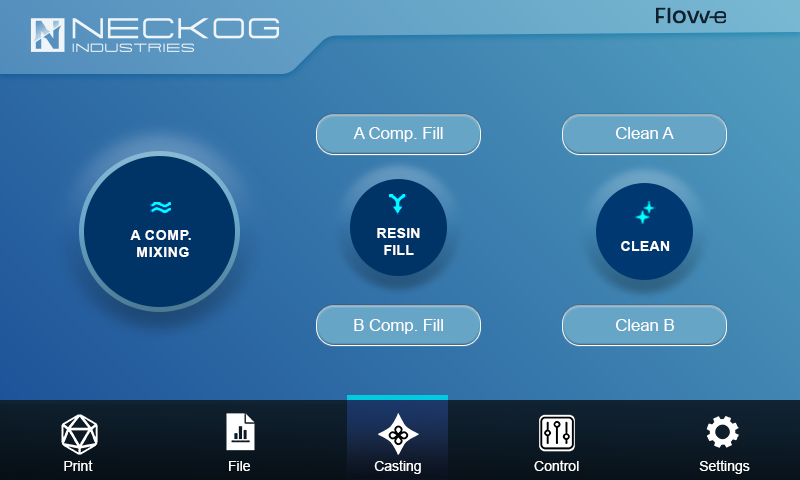
<style>
.page{position:relative;width:800px;height:480px}
.page>*{position:absolute;margin:0}
.t1{font:16.7px "ArialMT";color:#ffffff}
.t2{font:14.3px "Arial-BoldMT";color:#ffffff;text-transform:uppercase}
.t3{font:14.4px "Arial-BoldMT";color:#ffffff}
.t4{font:14px "ArialMT";color:#ffffff}
</style>
<div class="page">
<p class="t1" style="left:353px;top:127px;width:90px;height:15px">A Comp. Fill</p>
<p class="t1" style="left:616px;top:127px;width:58px;height:12px">Clean A</p>
<p class="t2" style="left:130px;top:230px;width:61px;height:27px;text-align:center">A Comp. <br>Mixing</p>
<p class="t3" style="left:377px;top:228px;width:43px;height:27px;text-align:center">RESIN<br>FILL</p>
<p class="t3" style="left:621px;top:241px;width:49px;height:10px">CLEAN</p>
<p class="t1" style="left:354px;top:319px;width:89px;height:15px">B Comp. Fill</p>
<p class="t1" style="left:616px;top:319px;width:58px;height:12px">Clean B</p>
<p class="t4" style="left:64px;top:460px;width:29px;height:11px">Print</p>
<p class="t4" style="left:229px;top:461px;width:21px;height:10px">File</p>
<p class="t4" style="left:374px;top:460px;width:47px;height:14px">Casting</p>
<p class="t4" style="left:534px;top:460px;width:45px;height:11px">Control</p>
<p class="t4" style="left:699px;top:460px;width:51px;height:14px">Settings</p>
</div>
